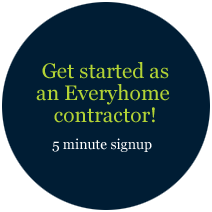
<style>
.page{position:relative;width:212px;height:212px;background:#001d34}
.page>*{position:absolute;margin:0}
.t1{font:21px/22px "Georgia";color:#b3d335}
.t2{font:14px "Georgia";color:#ffffff}
</style>
<div class="page">
<p class="t1" style="left:36px;top:62px;width:134px;height:61px;text-align:center">Get started as<br>an Everyhome <br>contractor!</p>
<p class="t2" style="left:52px;top:138px;width:100px;height:14px">5 minute signup</p>
</div>
